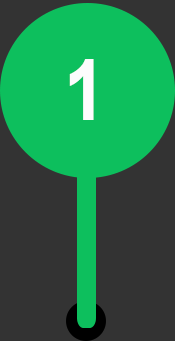
<style>
.page{position:relative;width:175px;height:341px;background:#333333}
.page>*{position:absolute;margin:0}
.t1{font:84.5px "Arial-BoldMT";color:#fcfcfc;scale:0.89 1}
</style>
<div class="page">
<p class="t1" style="left:69px;top:59px;width:25px;height:61px">1</p>
</div>
